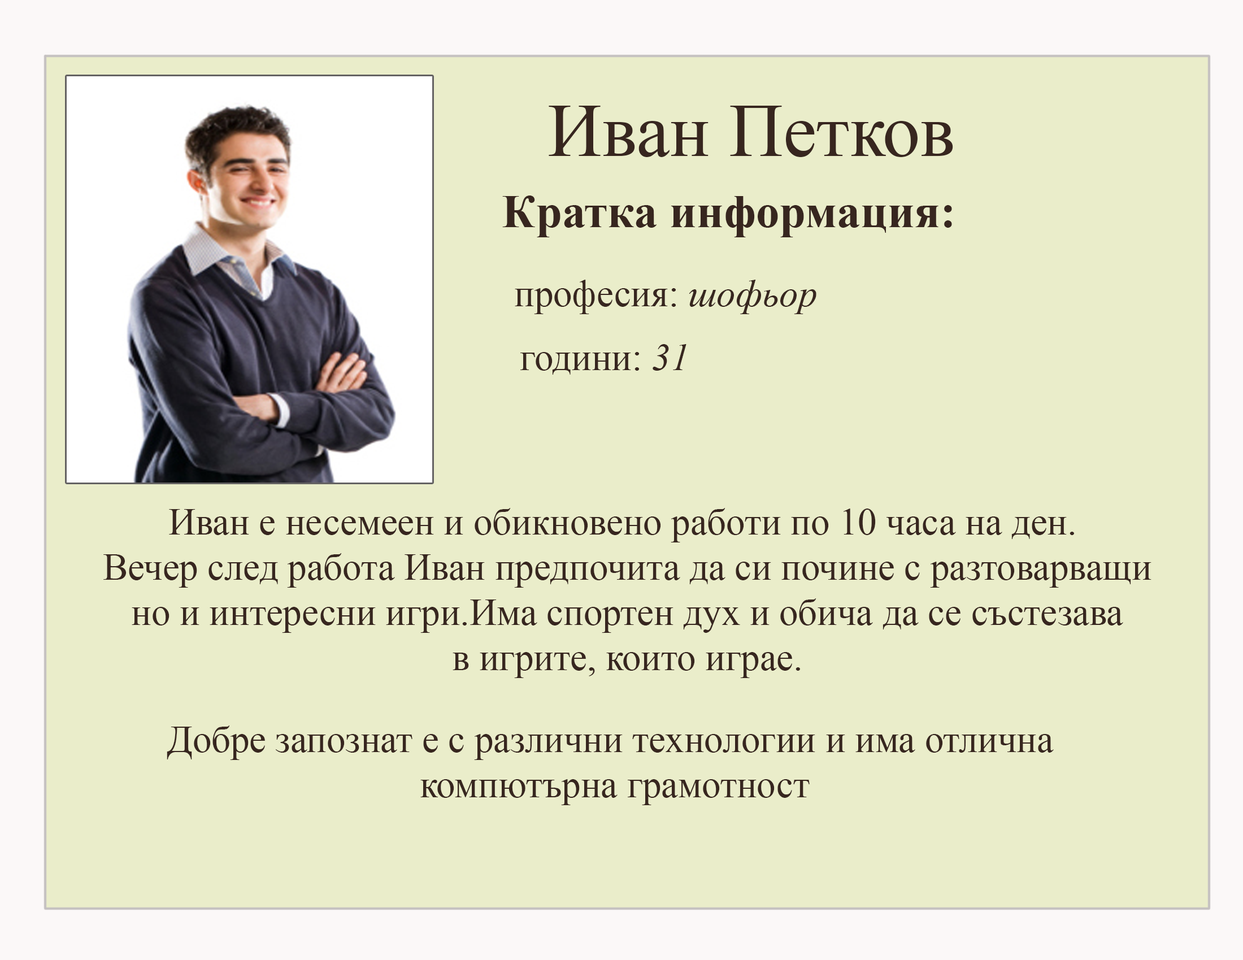
<style>
.page{position:relative;width:1243px;height:960px;background:#eaedca}
.page>*{position:absolute;margin:0}
.t1{font:75.3px "TimesNewRomanPSMT";color:#37261f}
.t2{font:47.1px "TimesNewRomanPS-BoldMT";color:#37261f}
.t3{font:37.7px "TimesNewRomanPSMT";color:#37261f}
.t4{font:37.7px "TimesNewRomanPS-ItalicMT";color:#37261f}
</style>
<div class="page">
<p class="t1" style="left:548px;top:106px;width:405px;height:51px">Иван Петков</p>
<p class="t2" style="left:502px;top:195px;width:450px;height:42px">Кратка информация:</p>
<p class="t3" style="left:515px;top:280px;width:301px;height:34px">професия: <span class="t4">шофьор</span></p>
<p class="t3" style="left:520px;top:344px;width:166px;height:30px">години: <span class="t4">31</span></p>
<p class="t3" style="left:103px;top:508px;width:1048px;height:170px;text-align:center">Иван е несемеен и обикновено работи по 10 часа на ден. <br>Вечер след работа Иван предпочита да си почине с разтоварващи<br>но и интересни игри.Има спортен дух и обича да се състезава<br>в игрите, които играе.</p>
<p class="t3" style="left:167px;top:725px;width:886px;height:80px;text-align:center">Добре запознат е с различни технологии и има отлична <br>компютърна грамотност</p>
</div>
